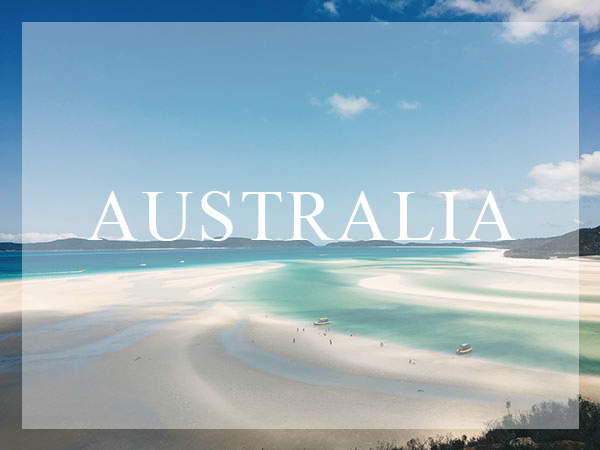
<style>
.page{position:relative;width:600px;height:450px}
.page>*{position:absolute;margin:0}
.t1{font:70.7px "TimesNewRomanPSMT";letter-spacing:0.05em;color:#ffffff}
</style>
<div class="page">
<p class="t1" style="left:87px;top:191px;width:429px;height:50px">AUSTRALIA</p>
</div>
